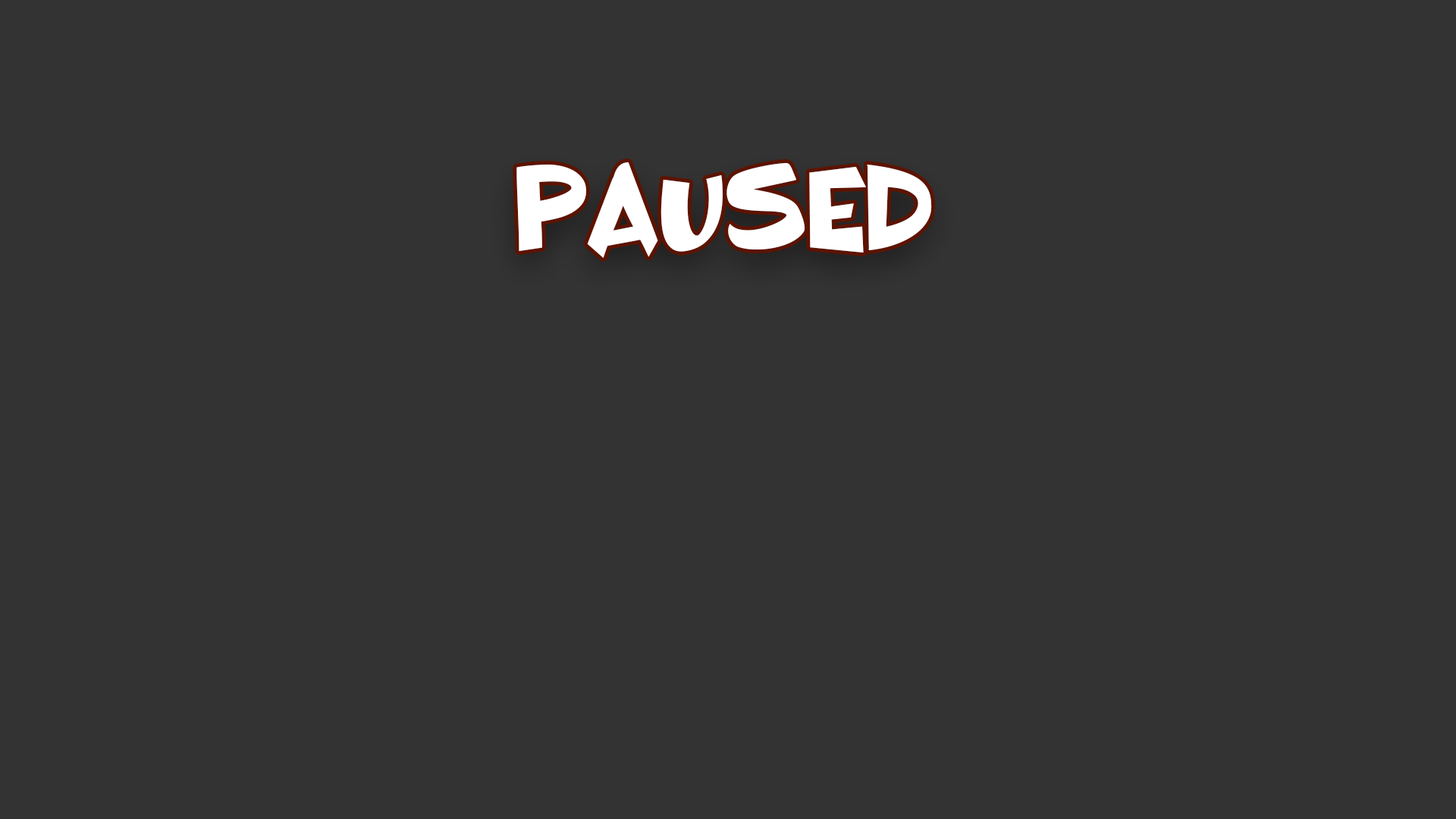
<style>
.page{position:relative;width:1456px;height:819px;background:#333333}
.page>*{position:absolute;margin:0}
.t1{font:136.8px "BLOCKHEADDUDEPersonalUse";color:#ffffff;scale:0.83 1}
</style>
<div class="page">
<p class="t1" style="left:516px;top:162px;width:416px;height:96px">PAUSED</p>
</div>
